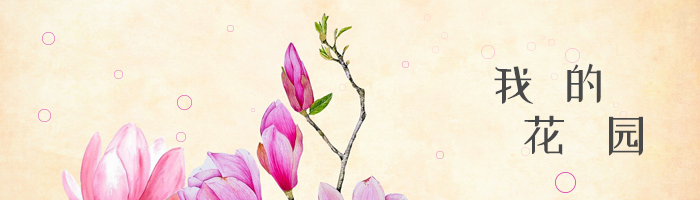
<style>
.page{position:relative;width:700px;height:200px}
.page>*{position:absolute;margin:0}
.t1{font:48px "xiaowei";color:#4a4949}
</style>
<div class="page">
<p class="t1" style="left:567px;top:63px;width:34px;height:40px">的</p>
<p class="t1" style="left:494px;top:66px;width:40px;height:38px">我</p>
<p class="t1" style="left:524px;top:115px;width:40px;height:40px">花</p>
<p class="t1" style="left:609px;top:116px;width:34px;height:40px">园</p>
</div>
